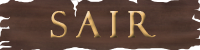
<style>
.page{position:relative;width:200px;height:50px}
.page>*{position:absolute;margin:0}
.t1{font:35px "FelixTitlingMT";letter-spacing:0.23em;font-weight:bold}
</style>
<div class="page">
<p class="t1" style="left:50px;top:11px;width:106px;height:27px">SAIR</p>
</div>
